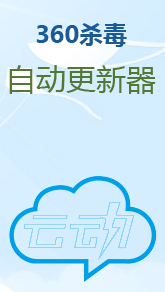
<style>
.page{position:relative;width:165px;height:292px;background:#d4edff}
.page>*{position:absolute;margin:0}
.t1{font:24px "MicrosoftYaHei-Bold";color:#1a5a96}
.t2{font:30px "MicrosoftYaHei";color:#547834}
</style>
<div class="page">
<p class="t1" style="left:9px;top:23px;width:147px;height:71px;text-align:center">360杀毒<br><span class="t2">自动更新器</span></p>
</div>
